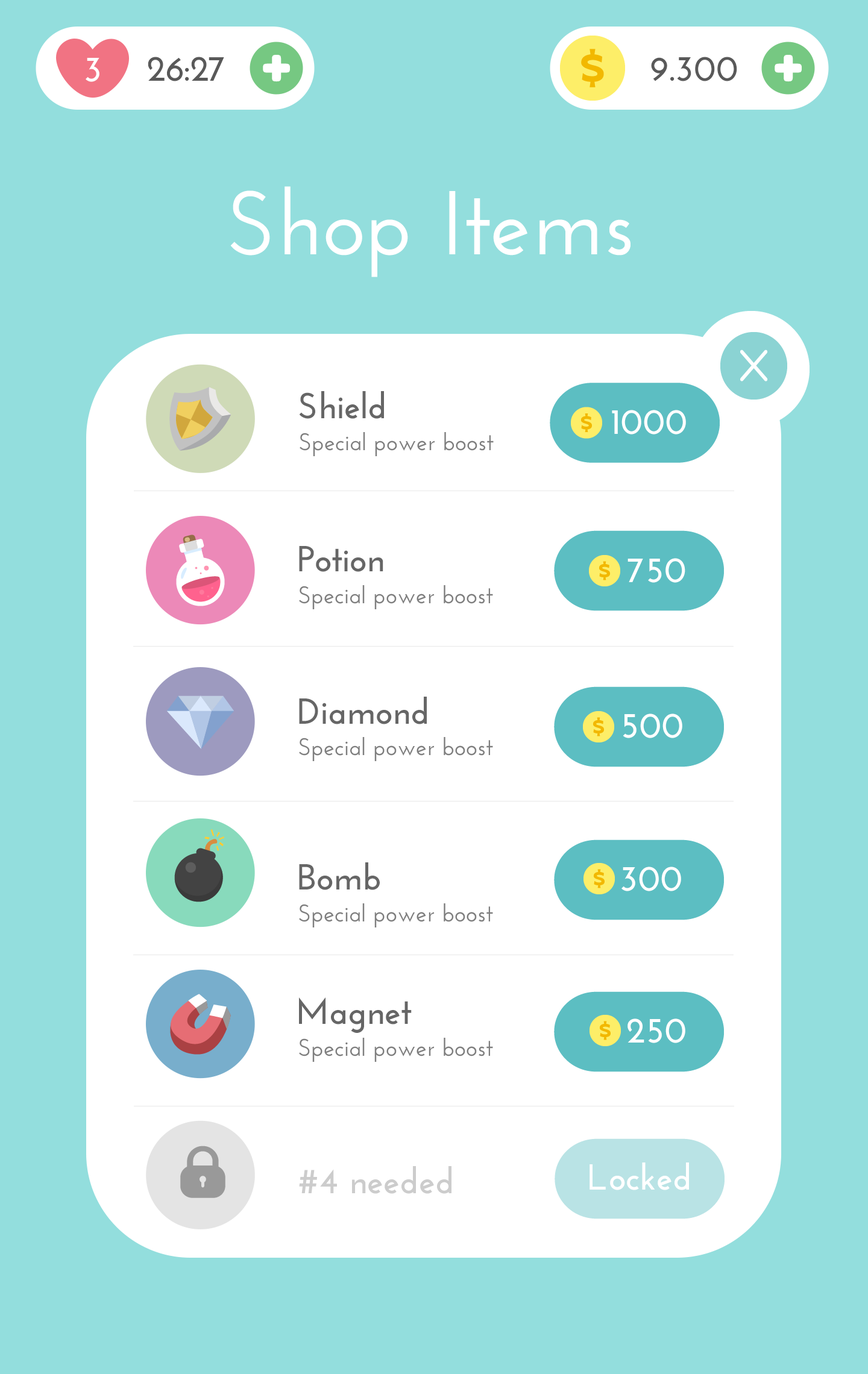
<style>
.page{position:relative;width:868px;height:1374px;background:#93dedd}
.page>*{position:absolute;margin:0}
.t1{font:36.2px "JosefinSans-Bold";color:#ffffff}
.t2{font:36.2px "JosefinSans-Bold";color:#595959}
.t3{font:90.4px "JosefinSans-SemiBold";color:#ffffff}
.t4{font:36.2px "JosefinSans-Bold";color:#666666}
.t5{font:24.1px "JosefinSans-SemiBold";color:#7e7e7e}
.t6{font:36.2px "JosefinSans-Bold";color:#cccccc}
</style>
<div class="page">
<p class="t1" style="left:86px;top:58px;width:13px;height:24px">3</p>
<p class="t2" style="left:148px;top:57px;width:76px;height:24px">26:27</p>
<p class="t2" style="left:651px;top:57px;width:86px;height:24px">9.300</p>
<p class="t3" style="left:230px;top:186px;width:400px;height:91px">Shop Items</p>
<p class="t4" style="left:299px;top:391px;width:85px;height:28px">Shield</p>
<p class="t1" style="left:612px;top:410px;width:74px;height:25px">1000</p>
<p class="t5" style="left:300px;top:432px;width:194px;height:24px">Special power boost</p>
<p class="t4" style="left:299px;top:546px;width:84px;height:26px">Potion</p>
<p class="t1" style="left:627px;top:558px;width:58px;height:25px">750</p>
<p class="t5" style="left:299px;top:585px;width:194px;height:24px">Special power boost</p>
<p class="t4" style="left:299px;top:697px;width:128px;height:27px">Diamond</p>
<p class="t1" style="left:623px;top:714px;width:59px;height:24px">500</p>
<p class="t5" style="left:299px;top:737px;width:194px;height:24px">Special power boost</p>
<p class="t4" style="left:299px;top:862px;width:81px;height:28px">Bomb</p>
<p class="t1" style="left:621px;top:867px;width:60px;height:24px">300</p>
<p class="t5" style="left:299px;top:903px;width:194px;height:24px">Special power boost</p>
<p class="t4" style="left:299px;top:997px;width:113px;height:36px">Magnet</p>
<p class="t1" style="left:627px;top:1018px;width:58px;height:25px">250</p>
<p class="t5" style="left:299px;top:1038px;width:194px;height:24px">Special power boost</p>
<p class="t6" style="left:299px;top:1166px;width:152px;height:28px">#4 needed</p>
<p class="t1" style="left:589px;top:1163px;width:100px;height:27px">Locked</p>
</div>
